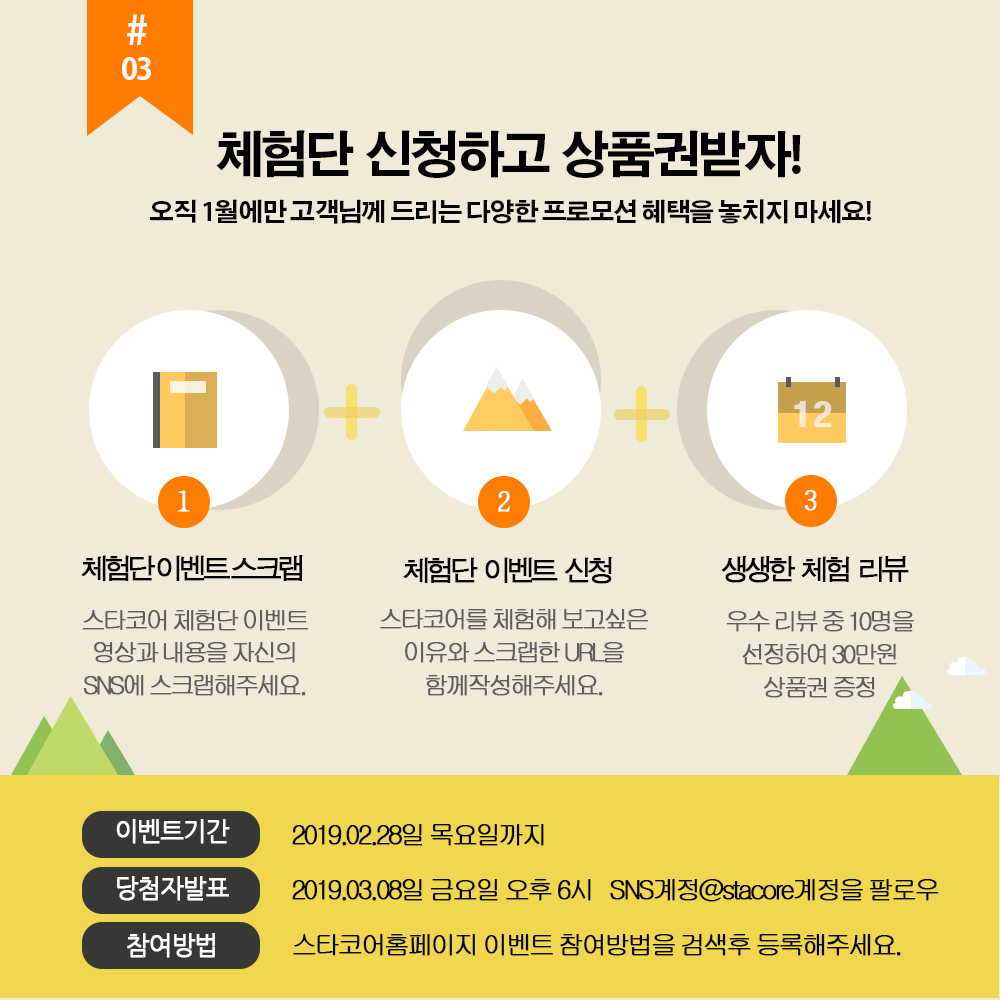
<style>
.page{position:relative;width:1000px;height:1000px;background:#f0ebd8}
.page>*{position:absolute;margin:0}
.t1{font:30px/35px "AdobeGothicStd-Bold";letter-spacing:-0.065em;color:#fdfbfa}
.t2{font:40px/35px "AdobeGothicStd-Bold";letter-spacing:-0.065em;color:#fdfbfa}
.t3{font:50px "AdobeGothicStd-Bold";letter-spacing:-0.085em;color:#020202}
.t4{font:50px "AdobeGothicStd-Bold";letter-spacing:-0.085em;color:#f6e070}
.t5{font:25px "AdobeGothicStd-Bold";letter-spacing:-0.045em;color:#060606}
.t6{font:30px "HeadlineR-HM";letter-spacing:-0.02em;color:#ffecd0}
.t7{font:27px "ÈÞ¸Õ¸íÁ¶";letter-spacing:-0.185em;color:#ffffff;font-weight:bold}
.t8{font:26.5px "ÈÞ¸Õ¸íÁ¶";letter-spacing:-0.185em;color:#ffffff;font-weight:bold}
.t9{font:28px "ÈÞ¸Õ°íµñ";letter-spacing:-0.185em;color:#040404;font-weight:bold}
.t10{font:27.9px "ÈÞ¸Õ°íµñ";letter-spacing:-0.185em;color:#040404;font-weight:bold}
.t11{font:24.9px/32.9px "Gulim";letter-spacing:-0.165em;color:#5e5e5f;font-weight:bold}
.t12{font:25px "NanumGothic";letter-spacing:-0.055em;color:#fefdfd;font-weight:bold}
.t13{font:26px/55px "Gulim";letter-spacing:-0.135em;color:#040404;font-weight:bold}
</style>
<div class="page">
<p class="t1" style="left:122px;top:14px;width:29px;height:66px;text-align:center"><span class="t2">#<br></span>03</p>
<p class="t3" style="left:216px;top:130px;width:585px;height:48px">체험단  신청하고  상품권받자<span class="t4">!</span></p>
<p class="t5" style="left:150px;top:199px;width:721px;height:25px">오직 1월에만 고객님께 드리는 다양한 프로모션 혜택을 놓치지 마세요!</p>
<p class="t6" style="left:794px;top:401px;width:38px;height:26px">12</p>
<p class="t7" style="left:178px;top:490px;width:12px;height:22px">1</p>
<p class="t8" style="left:498px;top:491px;width:12px;height:21px">2</p>
<p class="t8" style="left:804px;top:490px;width:13px;height:21px">3</p>
<p class="t9" style="left:81px;top:555px;width:222px;height:26px">체험단 이벤트 스크랩</p>
<p class="t10" style="left:403px;top:557px;width:209px;height:27px">체험단 이벤트 신청</p>
<p class="t10" style="left:721px;top:556px;width:188px;height:27px">생생한 체험 리뷰</p>
<p class="t11" style="left:82px;top:610px;width:226px;height:86px;text-align:center">스타코어 체험단 이벤트<br>영상과 내용을 자신의<br>SNS에 스크랩해주세요.</p>
<p class="t11" style="left:380px;top:609px;width:268px;height:87px;text-align:center">스타코어를 체험해 보고싶은<br>이유와 스크랩한 URL을<br>함께작성해주세요.</p>
<p class="t11" style="left:726px;top:611px;width:188px;height:87px;text-align:center">우수 리뷰 중 10명을<br>선정하여 30만원<br>상품권 증정</p>
<p class="t12" style="left:116px;top:819px;width:114px;height:25px">이벤트기간</p>
<p class="t13" style="left:292px;top:824px;width:647px;height:132px">2019.02.28일 목요일까지<br>2019.03.08일 금요일 오후 6시   SNS계정@stacore계정을 팔로우<br>스타코어홈페이지 이벤트 참여방법을 검색후 등록해주세요.</p>
<p class="t12" style="left:117px;top:876px;width:112px;height:25px">당첨자발표</p>
<p class="t12" style="left:127px;top:933px;width:88px;height:25px">참여방법</p>
</div>
